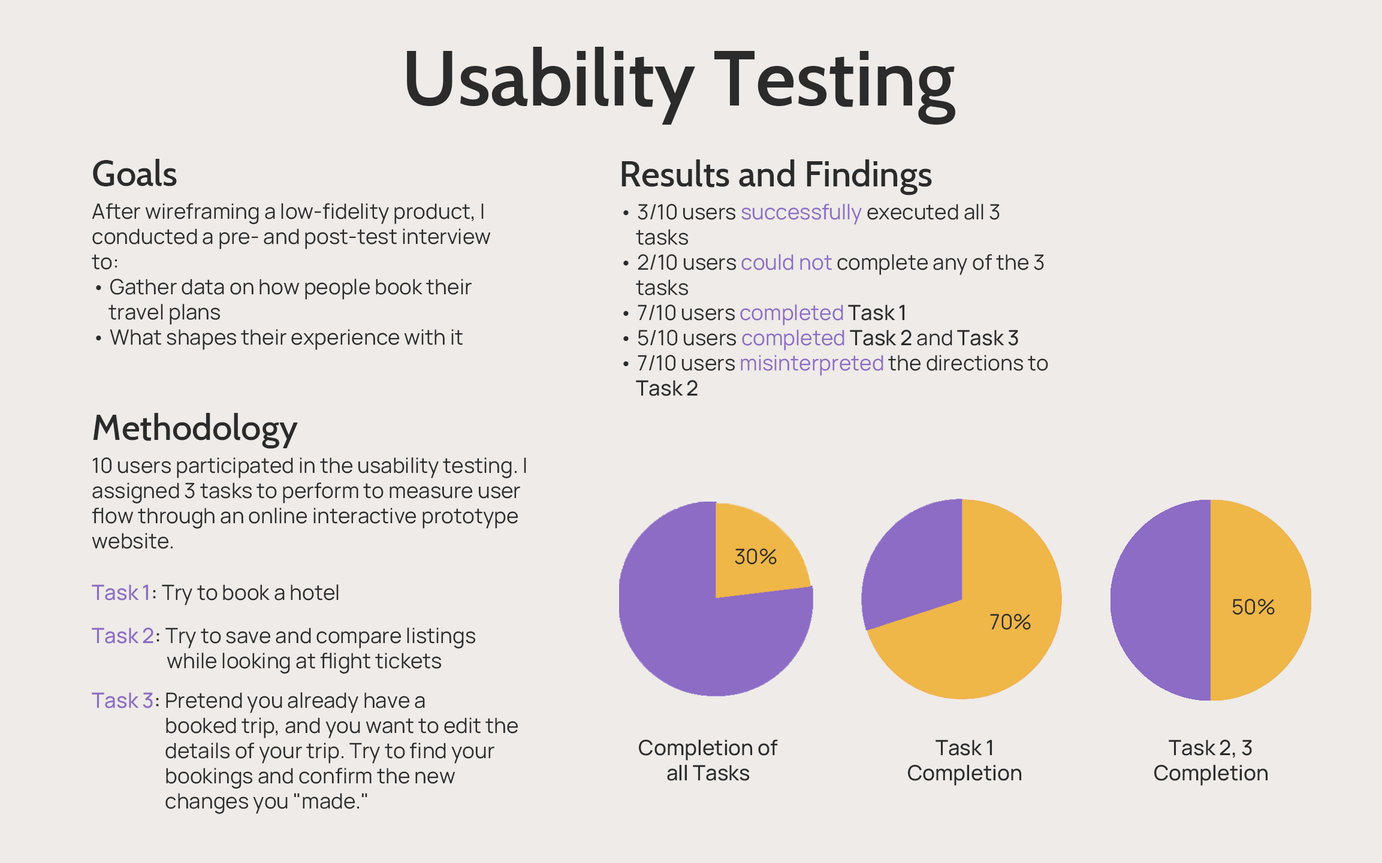
<style>
.page{position:relative;width:1382px;height:863px;background:#eeebe8}
.page>*{position:absolute;margin:0}
.t1{font:77.9px "Cabin-SemiBold";color:#2b2b2b}
.t2{font:36px "Cabin-Medium";color:#2b2b2b}
.t3{font:21px "Manrope-Regular";color:#2b2b2b}
.t4{font:21px "Manrope-Regular";color:#8c6cc5}
.t5{font:21px "Manrope-Medium";color:#2b2b2b}
.t6{font:21px/21.6px "Manrope-Regular";color:#2b2b2b}
.t7{font:21px/21.6px "Manrope-Medium";color:#8c6cc5}
.t8{font:21px/21.6px "Manrope-Medium";color:#2b2b2b}
</style>
<div class="page">
<p class="t1" style="left:407px;top:47px;width:548px;height:78px">Usability Testing</p>
<p class="t2" style="left:93px;top:159px;width:84px;height:27px">Goals</p>
<p class="t2" style="left:621px;top:159px;width:311px;height:36px">Results and Findings</p>
<p class="t3" style="left:92px;top:203px;width:399px;height:147px">After wireframing a low-fidelity product, I conducted a pre- and post-test interview to:<br>• Gather data on how people book their <br>    travel plans<br>• What shapes their experience with it</p>
<p class="t3" style="left:623px;top:204px;width:425px;height:192px">• 3/10 users <span class="t4">successfully </span>executed all 3<br>    tasks<br>• 2/10 users <span class="t4">could not</span> complete any of the 3 <br>    tasks<br>• 7/10 users <span class="t4">completed </span><span class="t5">Task 1<br></span>• 5/10 users <span class="t4">completed </span><span class="t5">Task 2</span> and <span class="t5">Task 3<br></span>• 7/10 users <span class="t4">misinterpreted</span> the directions to<br>    <span class="t5">Task 2</span></p>
<p class="t2" style="left:93px;top:413px;width:205px;height:36px">Methodology</p>
<p class="t3" style="left:92px;top:457px;width:434px;height:92px">10 users participated in the usability testing. I assigned 3 tasks to perform to measure user flow through an online interactive prototype website.</p>
<p class="t3" style="left:735px;top:548px;width:42px;height:16px">30%</p>
<p class="t6" style="left:92px;top:584px;width:384px;height:129px"><span class="t7">Task 1</span><span class="t8">:</span> Try to book a hotel<br><br><span class="t7">Task 2</span><span class="t8">:</span> Try to save and compare listings <br><br><br><span class="t7">Task 3</span><span class="t8">:</span> Pretend you already have a</p>
<p class="t3" style="left:1232px;top:599px;width:43px;height:16px">50%</p>
<p class="t3" style="left:990px;top:614px;width:41px;height:16px">70%</p>
<p class="t3" style="left:167px;top:653px;width:275px;height:21px">while looking at flight tickets</p>
<p class="t3" style="left:165px;top:717px;width:353px;height:97px">booked trip, and you want to edit the details of your trip. Try to find your bookings and confirm the new changes you "made."</p>
<p class="t5" style="left:638px;top:739px;width:140px;height:42px;text-align:center">Completion of all Tasks</p>
<p class="t5" style="left:907px;top:739px;width:115px;height:47px;text-align:center">Task 1 Completion</p>
<p class="t5" style="left:1154px;top:739px;width:114px;height:47px;text-align:center">Task 2, 3 Completion</p>
</div>
